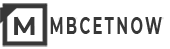
<style>
.page{position:relative;width:170px;height:49px;background:#ffffff}
.page>*{position:absolute;margin:0}
.t1{font:25px "Montserrat-Bold";letter-spacing:0.08em;color:#373737;scale:1.03 1}
.t2{font:23.7px "Montserrat-Bold";letter-spacing:0.16em;color:#373737;scale:0.62 1}
</style>
<div class="page">
<p class="t1" style="left:14px;top:17px;width:21px;height:18px">M</p>
<p class="t2" style="left:50px;top:17px;width:112px;height:17px">MBCETNOW</p>
</div>
